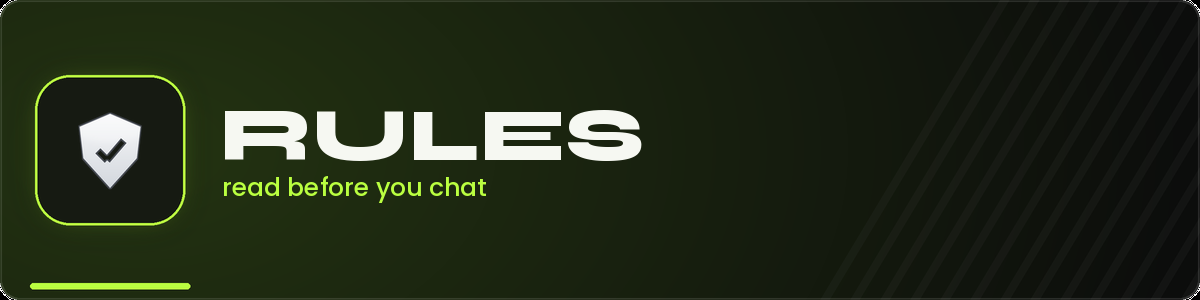
<style>
.page{position:relative;width:1200px;height:300px}
.page>*{position:absolute;margin:0}
.t1{font:75px "Syne-ExtraBold";color:#f6f8f2}
.t2{font:25px "Poppins-Medium";color:#baff40}
</style>
<div class="page">
<p class="t1" style="left:225px;top:110px;width:417px;height:51px">RULES</p>
<p class="t2" style="left:224px;top:176px;width:262px;height:27px">read before you chat</p>
</div>
